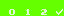
<style>
.page{position:relative;width:64px;height:16px;background:#65ff00}
.page>*{position:absolute;margin:0}
.t1{font:8px "Early-GameBoy";color:#e0f8cf}
</style>
<div class="page">
<p class="t1" style="left:9px;top:9px;width:6px;height:6px">0</p>
<p class="t1" style="left:26px;top:9px;width:4px;height:6px">1</p>
<p class="t1" style="left:41px;top:9px;width:6px;height:6px">2</p>
</div>
